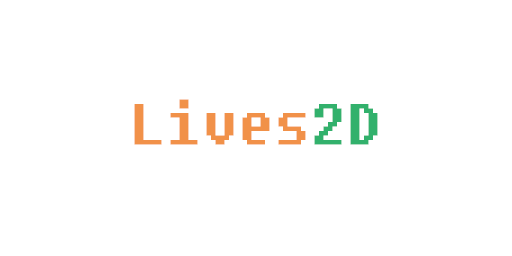
<style>
.page{position:relative;width:512px;height:256px;background:#ffffff}
.page>*{position:absolute;margin:0}
.t1{font:72px "Fixedsys";color:#f19149}
.t2{font:72px "Fixedsys";color:#32b16c}
</style>
<div class="page">
<p class="t1" style="left:134px;top:99px;width:244px;height:46px">Lives<span class="t2">2D</span></p>
</div>
